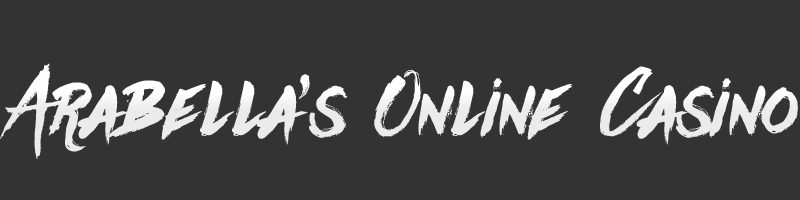
<style>
.page{position:relative;width:800px;height:200px;background:#333333}
.page>*{position:absolute;margin:0}
.t1{font:95px "Againts";color:#ffffff}
</style>
<div class="page">
<p class="t1" style="left:0px;top:63px;width:798px;height:96px">Arabella’s  Online  Casino</p>
</div>
